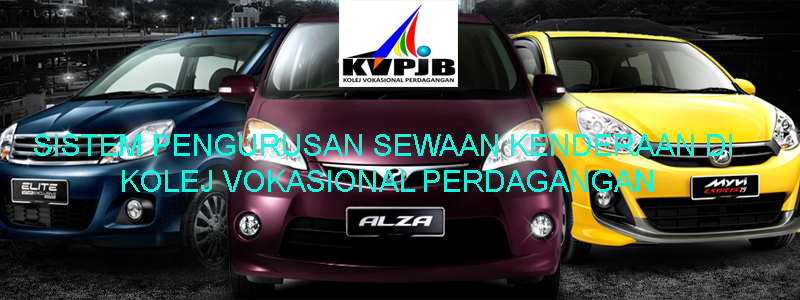
<style>
.page{position:relative;width:800px;height:300px}
.page>*{position:absolute;margin:0}
.t1{font:30px "DokChampa";color:#0df7de}
</style>
<div class="page">
<p class="t1" style="left:34px;top:134px;width:698px;height:58px;text-align:center">SISTEM PENGURUSAN SEWAAN KENDERAAN DI<br> KOLEJ VOKASIONAL PERDAGANGAN</p>
</div>
